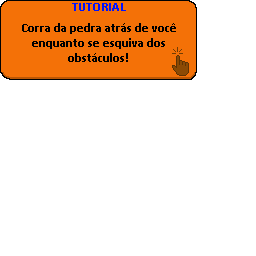
<style>
.page{position:relative;width:256px;height:256px;background:#ffffff}
.page>*{position:absolute;margin:0}
.t1{font:12.5px "Calibri-Bold";color:#000000}
</style>
<div class="page">
<p class="t1" style="left:22px;top:23px;width:154px;height:39px;text-align:center">Corra da pedra atrás de você enquanto se esquiva dos obstáculos!</p>
</div>
